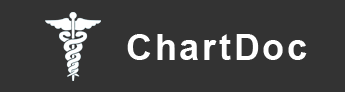
<style>
.page{position:relative;width:345px;height:92px;background:#333333}
.page>*{position:absolute;margin:0}
.t1{font:36px "Arial-BoldMT";letter-spacing:0.075em;color:#ffffff}
</style>
<div class="page">
<p class="t1" style="left:127px;top:34px;width:180px;height:26px">ChartDoc</p>
</div>
